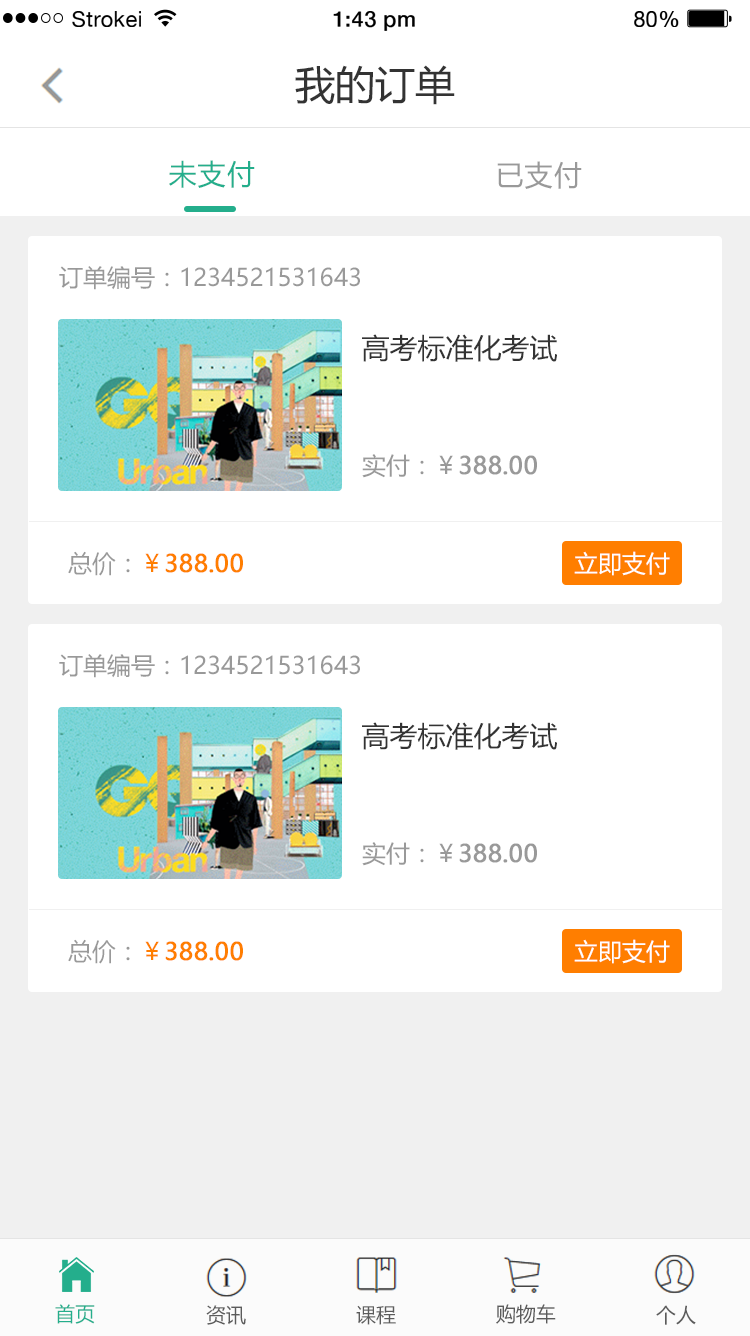
<style>
.page{position:relative;width:750px;height:1336px;background:#ffffff}
.page>*{position:absolute;margin:0}
.t1{font:21.8px "HelveticaNeue";letter-spacing:0.02em;color:#000000}
.t2{font:21.8px "HelveticaNeue-Medium";letter-spacing:0.02em;color:#000000}
.t3{font:40px "MicrosoftYaHei";color:#333333}
.t4{font:28px "MicrosoftYaHei";letter-spacing:0.05em;color:#24ae8c}
.t5{font:28px "MicrosoftYaHei";letter-spacing:0.05em;color:#999999}
.t6{font:24px "MicrosoftYaHei";color:#999999}
.t7{font:28px "MicrosoftYaHei";color:#333333}
.t8{font:24px "MicrosoftYaHei";color:#999999;font-weight:bold}
.t9{font:24px "MicrosoftYaHei";color:#ff7e00;font-weight:bold}
.t10{font:24px "MicrosoftYaHei";color:#ff7e00}
.t11{font:24px "MicrosoftYaHei";color:#ffffff}
.t12{font:20px "MicrosoftYaHei";color:#24ae8c}
.t13{font:20px "MicrosoftYaHei";color:#5b5b5b}
</style>
<div class="page">
<p class="t1" style="left:72px;top:11px;width:69px;height:16px">Strokei</p>
<p class="t2" style="left:333px;top:11px;width:82px;height:20px">1:43 pm</p>
<p class="t1" style="left:634px;top:11px;width:45px;height:16px">80<span class="t2">%</span></p>
<p class="t3" style="left:295px;top:65px;width:160px;height:40px">我的订单</p>
<p class="t4" style="left:169px;top:160px;width:86px;height:28px">未支付</p>
<p class="t5" style="left:497px;top:161px;width:85px;height:28px">已支付</p>
<p class="t6" style="left:59px;top:266px;width:301px;height:24px">订单编号：1234521531643</p>
<p class="t7" style="left:362px;top:334px;width:195px;height:28px">高考标准化考试</p>
<p class="t8" style="left:362px;top:454px;width:175px;height:24px"><span class="t6">实付：￥</span>388.00</p>
<p class="t9" style="left:68px;top:551px;width:175px;height:25px"><span class="t6">总价：</span><span class="t10">￥</span>388.00</p>
<p class="t11" style="left:574px;top:551px;width:96px;height:25px">立即支付</p>
<p class="t6" style="left:59px;top:654px;width:301px;height:24px">订单编号：1234521531643</p>
<p class="t7" style="left:362px;top:722px;width:195px;height:28px">高考标准化考试</p>
<p class="t8" style="left:362px;top:842px;width:175px;height:24px"><span class="t6">实付：￥</span>388.00</p>
<p class="t9" style="left:68px;top:939px;width:175px;height:25px"><span class="t6">总价：</span><span class="t10">￥</span>388.00</p>
<p class="t11" style="left:574px;top:939px;width:96px;height:25px">立即支付</p>
<p class="t12" style="left:55px;top:1304px;width:40px;height:20px">首页</p>
<p class="t13" style="left:206px;top:1305px;width:40px;height:20px">资讯</p>
<p class="t13" style="left:356px;top:1305px;width:40px;height:20px">课程</p>
<p class="t13" style="left:496px;top:1304px;width:60px;height:20px">购物车</p>
<p class="t13" style="left:656px;top:1305px;width:40px;height:20px">个人</p>
</div>
